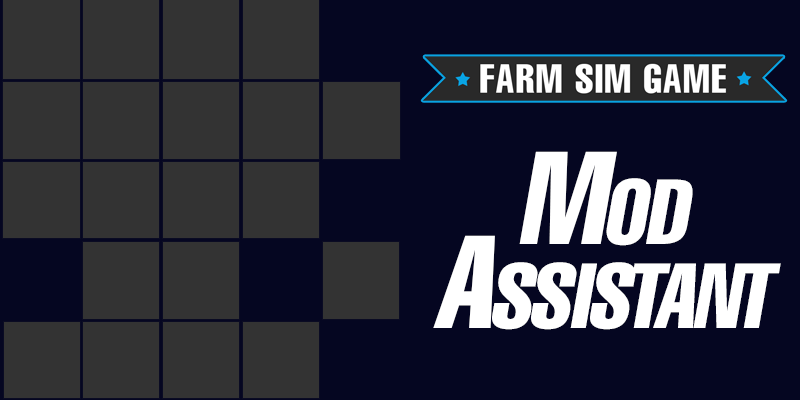
<style>
.page{position:relative;width:800px;height:400px;background:#050621}
.page>*{position:absolute;margin:0}
.t1{font:129.4px/84px "Helvetica-Compressed";letter-spacing:-0.005em;color:#ffffff;font-variant:small-caps;font-style:italic}
</style>
<div class="page">
<p class="t1" style="left:433px;top:151px;width:348px;height:179px;text-align:center">Mod<br>Assistant</p>
</div>
